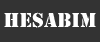
<style>
.page{position:relative;width:100px;height:42px;background:#333333}
.page>*{position:absolute;margin:0}
.t1{font:21.3px "Stencil";color:#ffffff}
</style>
<div class="page">
<p class="t1" style="left:4px;top:12px;width:92px;height:16px">Hesabim</p>
</div>
